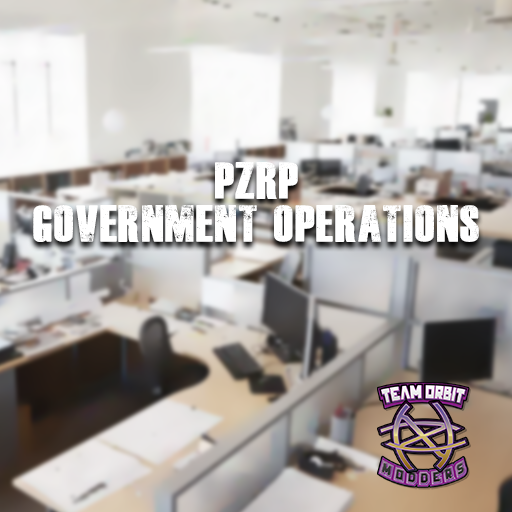
<style>
.page{position:relative;width:512px;height:512px}
.page>*{position:absolute;margin:0}
.t1{font:36px "DeadKansas";color:#ffffff}
</style>
<div class="page">
<p class="t1" style="left:33px;top:162px;width:446px;height:80px;text-align:center">PZRP<br>Government Operations</p>
</div>
